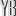
<style>
.page{position:relative;width:16px;height:16px}
.page>*{position:absolute;margin:0}
.t1{font:20.7px "AgencyFB-Reg";color:#d7d7d7}
.t2{font:20.7px "AgencyFB-Reg";color:#383838}
</style>
<div class="page">
<p class="t1" style="left:0px;top:0px;width:15px;height:16px">YB</p>
<p class="t2" style="left:1px;top:0px;width:16px;height:16px">YB</p>
</div>
